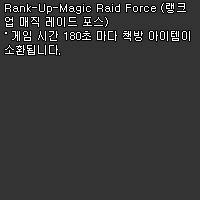
<style>
.page{position:relative;width:200px;height:200px;background:#333333}
.page>*{position:absolute;margin:0}
.t1{font:11px/14px "Dotum";color:#ffffff}
</style>
<div class="page">
<p class="t1" style="left:5px;top:3px;width:185px;height:52px">Rank-Up-Magic Raid Force (랭크<br>업 매직 레이드 포스)<br>˚ 게임 시간 180초 마다 책방 아이템이<br>소환됩니다.</p>
</div>
